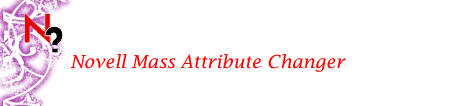
<style>
.page{position:relative;width:453px;height:106px;background:#ffffff}
.page>*{position:absolute;margin:0}
.t1{font:18px "LucidaFax-Italic";color:#ff0000}
</style>
<div class="page">
<p class="t1" style="left:71px;top:54px;width:275px;height:18px">Novell Mass Attribute Changer</p>
</div>
